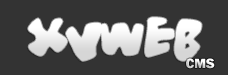
<style>
.page{position:relative;width:228px;height:75px;background:#333333}
.page>*{position:absolute;margin:0}
.t1{font:48px "Vitamin";color:#ededed}
.t2{font:14px "FranklinGothic-Heavy"}
</style>
<div class="page">
<p class="t1" style="left:28px;top:17px;width:174px;height:44px">XVweb</p>
<p class="t2" style="left:186px;top:58px;width:29px;height:11px">CMS</p>
</div>
